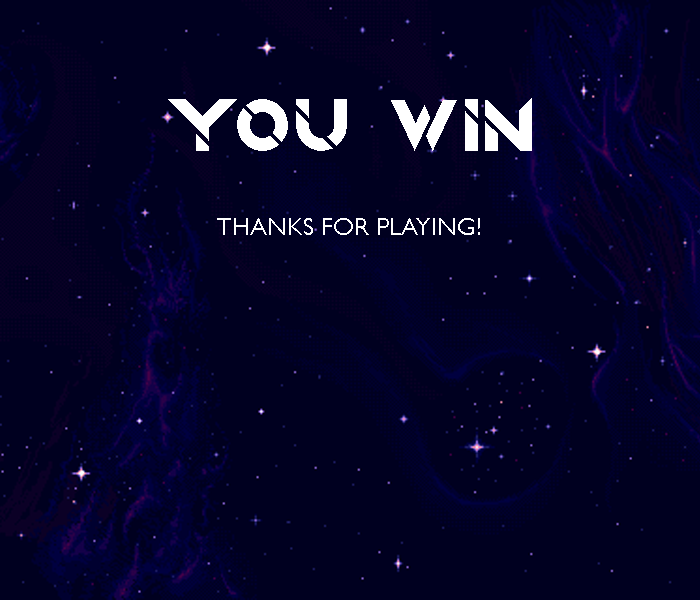
<style>
.page{position:relative;width:700px;height:600px;background:#000020}
.page>*{position:absolute;margin:0}
.t1{font:75px "QuantumRegular";color:#ffffff}
.t2{font:25px "GillSansMT";color:#ffffff}
</style>
<div class="page">
<p class="t1" style="left:168px;top:98px;width:364px;height:53px">YOU WIN</p>
<p class="t2" style="left:217px;top:218px;width:263px;height:17px">THANKS FOR PLAYING!</p>
</div>
